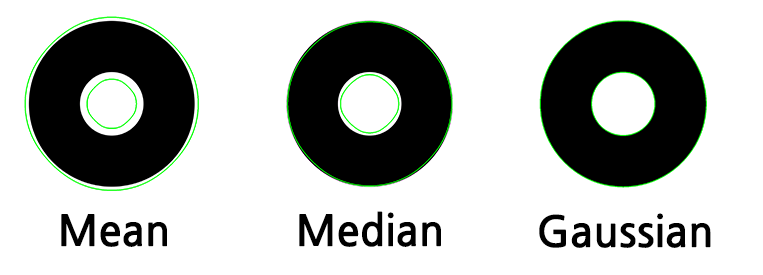
<style>
.page{position:relative;width:763px;height:275px;background:#ffffff}
.page>*{position:absolute;margin:0}
.t1{font:42.4px "NanumGothicBold";color:#000000}
</style>
<div class="page">
<p class="t1" style="left:61px;top:214px;width:106px;height:33px">Mean</p>
<p class="t1" style="left:299px;top:211px;width:142px;height:36px">Median</p>
<p class="t1" style="left:539px;top:213px;width:172px;height:35px">Gaussian</p>
</div>
